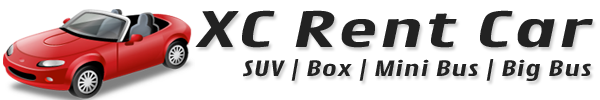
<style>
.page{position:relative;width:600px;height:100px;background:#ffffff}
.page>*{position:absolute;margin:0}
.t1{font:47.3px "ContrailOne-Regular";color:#222222;scale:1.86 1}
.t2{font:20.6px "ContrailOne-Regular";color:#222222;scale:1.55 1}
</style>
<div class="page">
<p class="t1" style="left:195px;top:10px;width:398px;height:38px">XC Rent Car</p>
<p class="t2" style="left:243px;top:59px;width:348px;height:22px">SUV | Box | Mini Bus | Big Bus</p>
</div>
